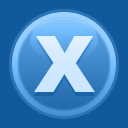
<style>
.page{position:relative;width:128px;height:128px;background:#105a9c}
.page>*{position:absolute;margin:0}
.t1{font:78px "Arial-Black";color:#d1e9ff}
</style>
<div class="page">
<p class="t1" style="left:34px;top:36px;width:61px;height:56px">X</p>
</div>
